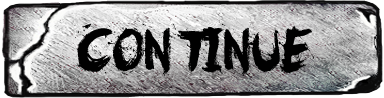
<style>
.page{position:relative;width:384px;height:98px}
.page>*{position:absolute;margin:0}
.t1{font:55px "OhNo";color:#010101}
</style>
<div class="page">
<p class="t1" style="left:74px;top:23px;width:241px;height:55px">CONTINUE</p>
</div>
